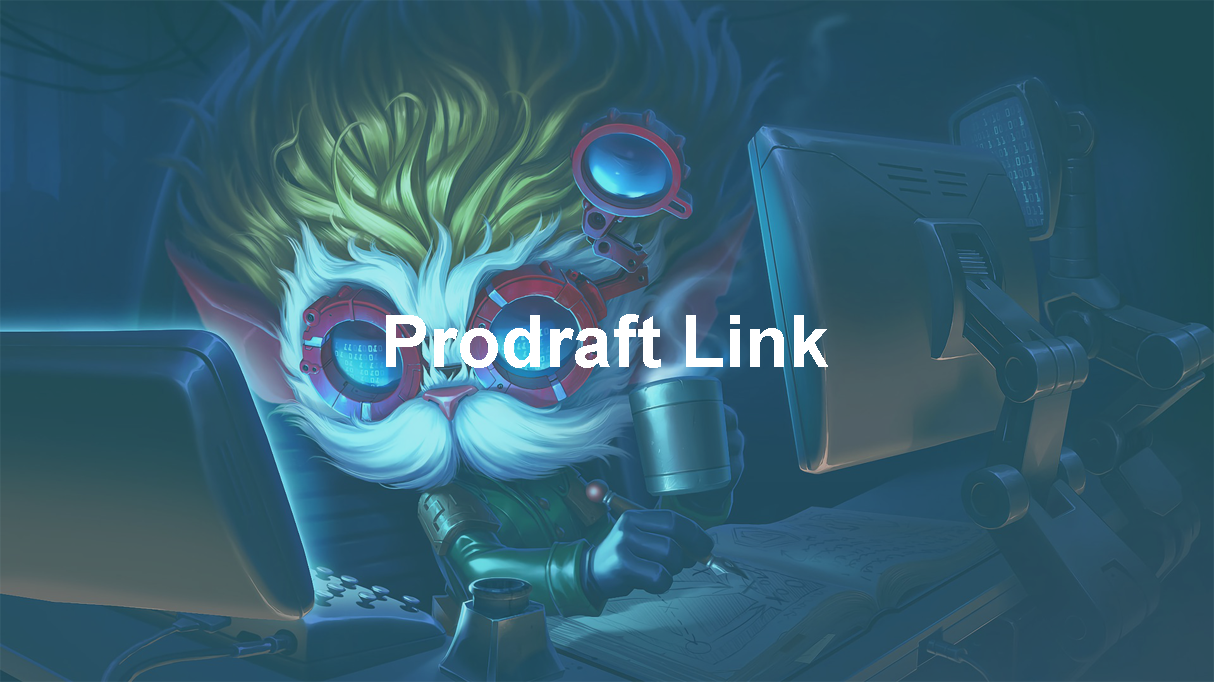
<style>
.page{position:relative;width:1214px;height:682px}
.page>*{position:absolute;margin:0}
.t1{font:72px "Arial-BoldMT";color:#ffffff}
</style>
<div class="page">
<p class="t1" style="left:386px;top:314px;width:442px;height:54px">Prodraft Link</p>
</div>
